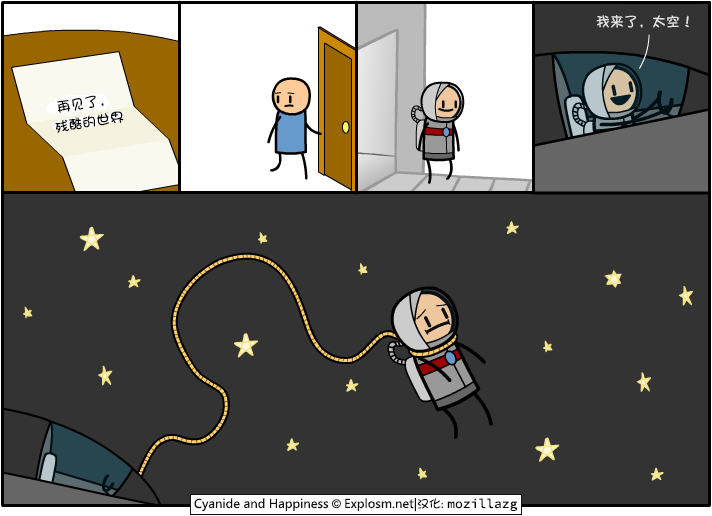
<style>
.page{position:relative;width:712px;height:516px;background:#333333}
.page>*{position:absolute;margin:0}
.t1{font:14px "DFShaoNvW5";color:#e5e5e5}
.t2{font:14.2px "DFShaoNvW5";color:#000000}
.t3{font:14px "DFShaoNvW5";color:#000000}
</style>
<div class="page">
<p class="t1" style="left:596px;top:15px;width:93px;height:13px">我来了，太空！</p>
<p class="t2" style="left:57px;top:95px;width:47px;height:18px;rotate:-9deg">再见了，</p>
<p class="t3" style="left:55px;top:111px;width:69px;height:22px;rotate:-9deg">残酷的世界</p>
</div>
